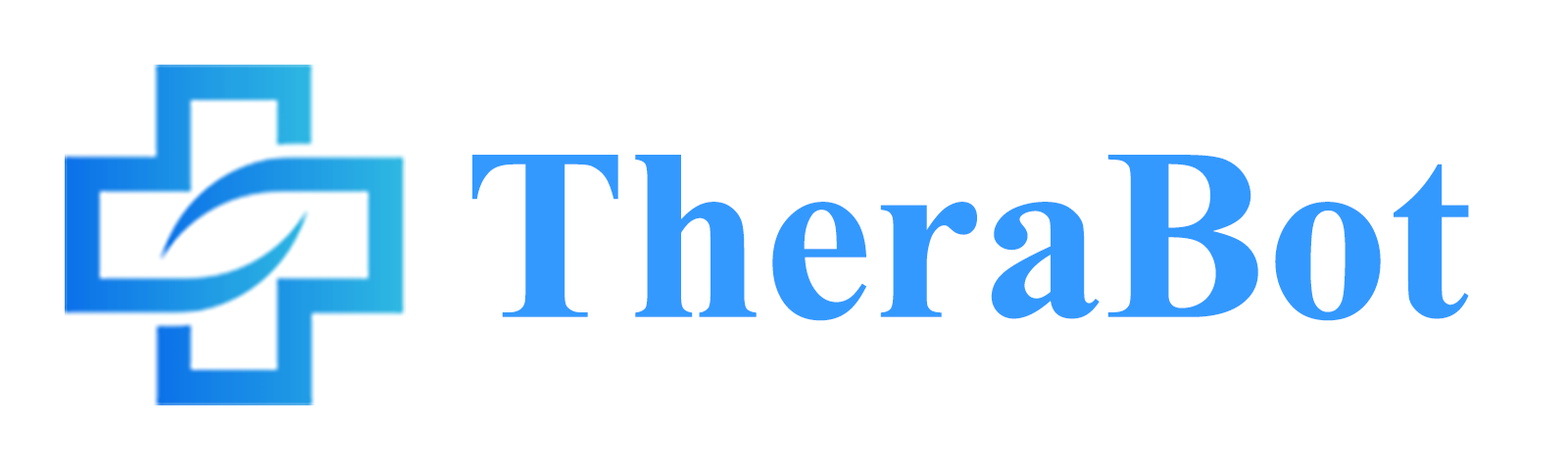
<style>
.page{position:relative;width:1568px;height:470px;background:#ffffff}
.page>*{position:absolute;margin:0}
.t1{font:245px "TimesNewRomanPS-BoldMT";color:#3399ff}
</style>
<div class="page">
<p class="t1" style="left:472px;top:155px;width:997px;height:166px">TheraBot</p>
</div>
